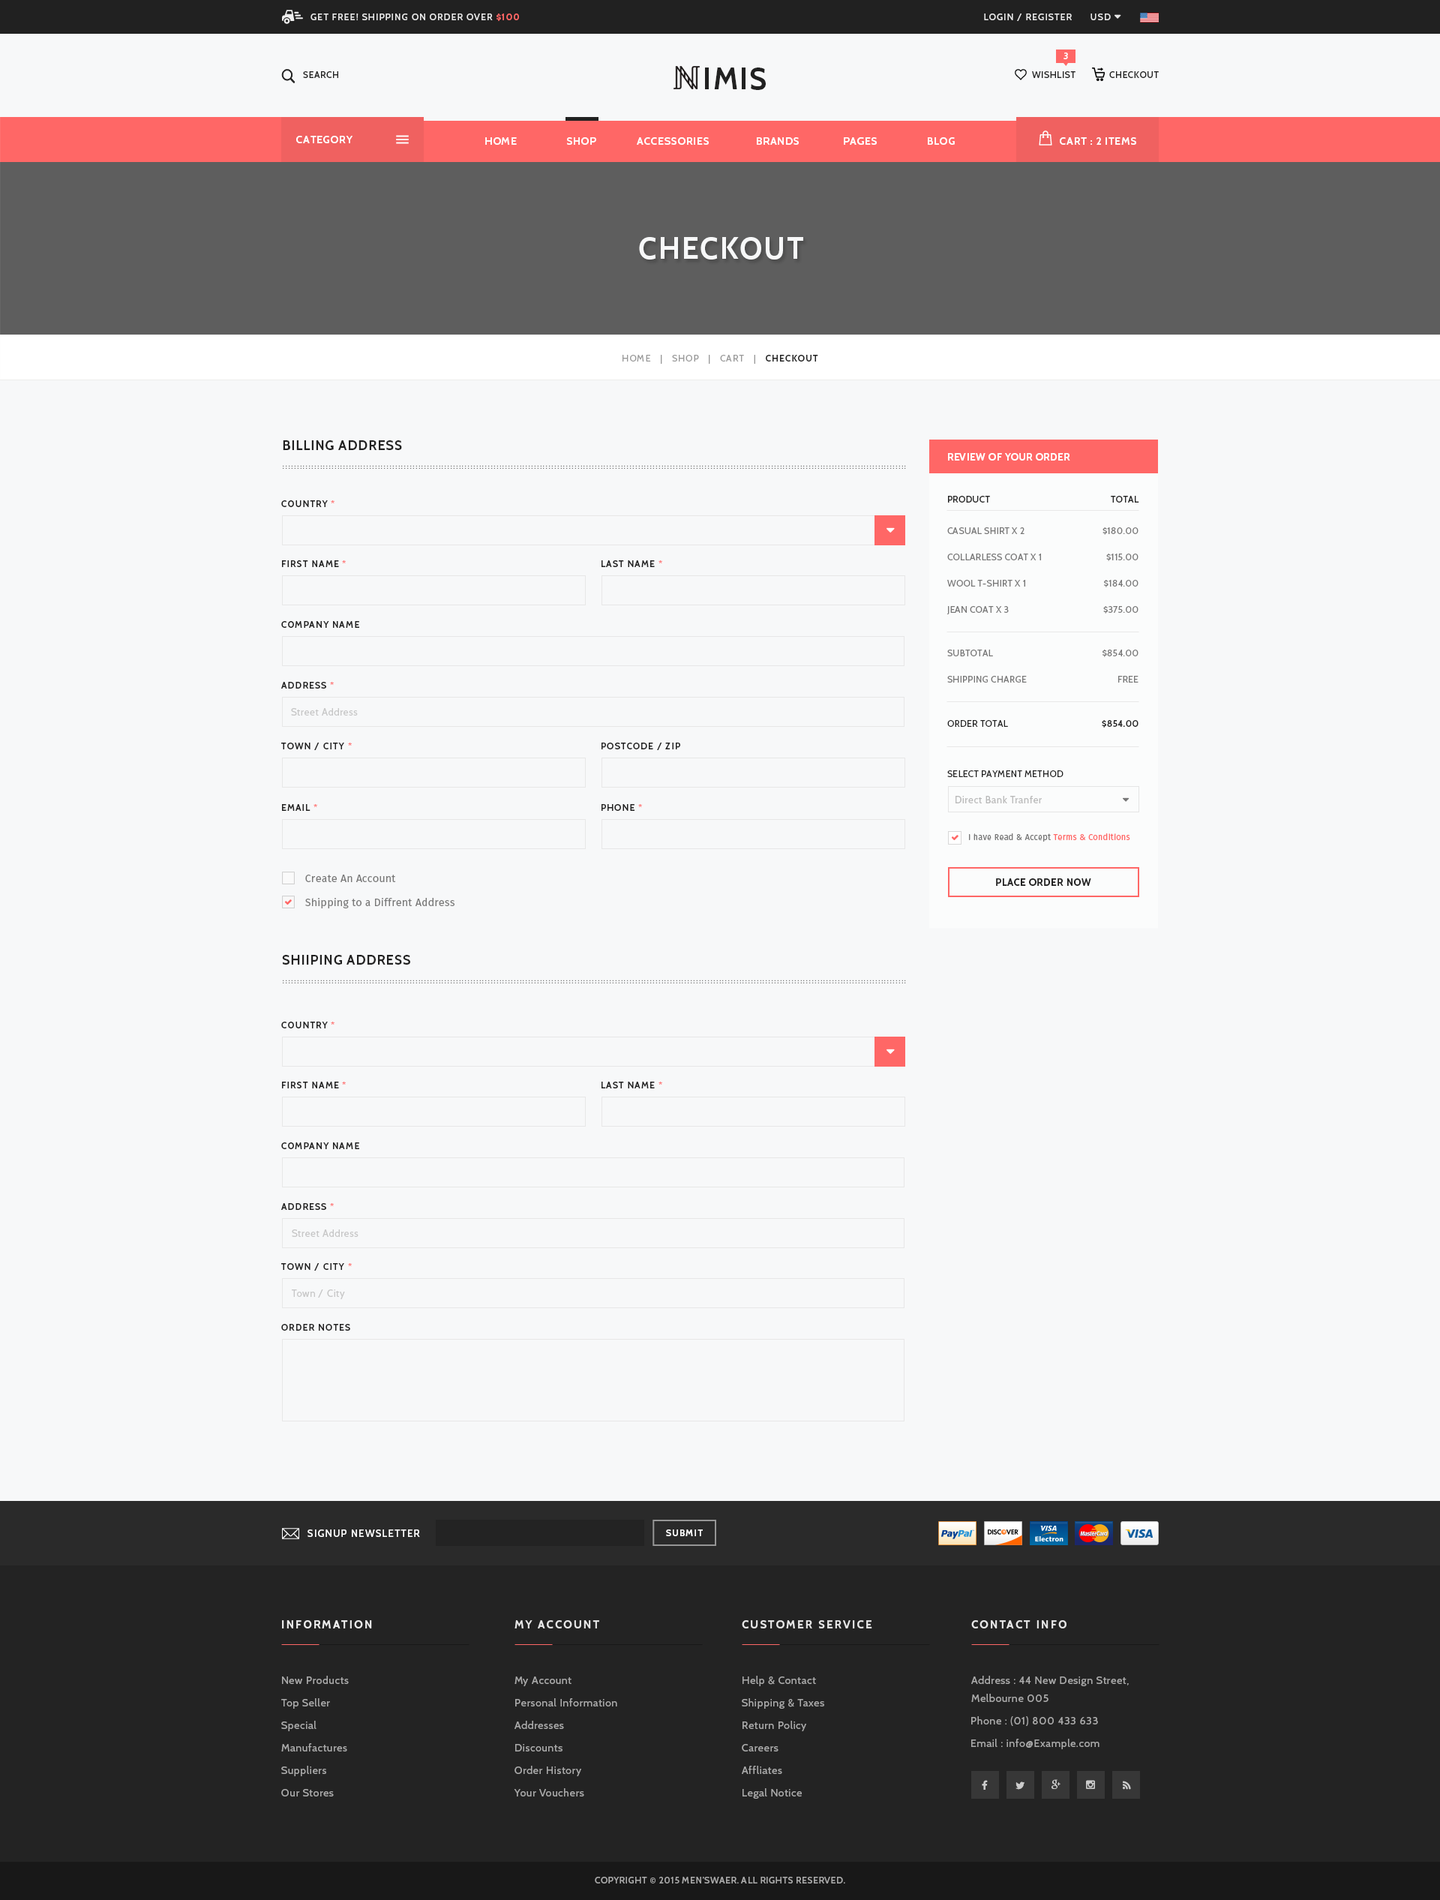
<style>
.page{position:relative;width:1440px;height:1900px;background:#f7f8f9}
.page>*{position:absolute;margin:0}
.t1{font:9px "Cabin-Medium";letter-spacing:0.1em;color:#e8e8e8;text-transform:uppercase}
.t2{font:9px "Cabin-Bold";letter-spacing:0.1em;color:#ff6766;text-transform:uppercase}
.t3{font:9px "Cabin-SemiBold";letter-spacing:0.05em;color:#ffffff;text-transform:uppercase}
.t4{font:9px "Cabin-Medium";letter-spacing:0.05em;color:#212121;text-transform:uppercase}
.t5{font:30px "Cabin-Bold";letter-spacing:0.05em;color:#212121;text-transform:uppercase}
.t6{font:10.5px "Cabin-Bold";letter-spacing:0.05em;color:#ffffff;text-transform:uppercase}
.t7{font:30px "Cabin-Bold";letter-spacing:0.05em;color:#f7f8f9;text-transform:uppercase}
.t8{font:9px "Cabin-Regular";letter-spacing:0.1em;color:#999999;text-transform:uppercase}
.t9{font:9px "Cabin-SemiBold";letter-spacing:0.1em;color:#212121;text-transform:uppercase}
.t10{font:13.5px "Cabin-Bold";letter-spacing:0.05em;color:#212121;text-transform:uppercase}
.t11{font:9.8px "Cabin-Bold";letter-spacing:0.05em;color:#ffffff;text-transform:uppercase}
.t12{font:6px "Cabin-Bold";letter-spacing:0.25em;color:#737373;text-transform:uppercase}
.t13{font:9px "Cabin-Medium";letter-spacing:0.03em;color:#232323;text-transform:uppercase}
.t14{font:9px "Cabin-SemiBold";letter-spacing:0.1em;color:#ff6766;text-transform:uppercase}
.t15{font:9px "Cabin-Regular";letter-spacing:0.03em;color:#777777;text-transform:uppercase}
.t16{font:9.8px "Cabin-Regular";letter-spacing:0.05em;color:#c7c7c7}
.t17{font:9px "Cabin-Regular";letter-spacing:0.03em;color:#212121;text-transform:uppercase}
.t18{font:9px "Cabin-SemiBold";letter-spacing:0.03em;color:#212121;text-transform:uppercase}
.t19{font:9.8px "Cabin-Regular";letter-spacing:0.05em;color:#bababa}
.t20{font:8.2px "FiraSans-Regular";letter-spacing:0.02em;color:#777777}
.t21{font:8.2px "FiraSans-Regular";letter-spacing:0.02em;color:#ff6766}
.t22{font:10.5px "FiraSans-Regular";letter-spacing:0.02em;color:#777777}
.t23{font:9.8px "Cabin-Bold";letter-spacing:0.05em;color:#232323;text-transform:uppercase}
.t24{font:9.7px "Cabin-Medium";letter-spacing:0.1em;color:#ffffff;text-transform:uppercase}
.t25{font:9px "Cabin-SemiBold";letter-spacing:0.1em;color:#ffffff;text-transform:uppercase}
.t26{font:11.2px "Cabin-Bold";letter-spacing:0.15em;color:#eeeeee;text-transform:uppercase}
.t27{font:11.2px "Cabin-Bold";letter-spacing:0.15em;color:#e8e8e8;text-transform:uppercase}
.t28{font:10.5px "Cabin-Regular";letter-spacing:0.05em;color:#aaaaaa}
.t29{font:10.5px/18px "Cabin-Regular";letter-spacing:0.05em;color:#aaaaaa}
.t30{font:9px "Cabin-Medium";letter-spacing:0.05em;color:#aaaaaa;text-transform:uppercase}
</style>
<div class="page">
<p class="t1" style="left:310px;top:14px;width:209px;height:7px">get free! shipping on order over <span class="t2">$100</span></p>
<p class="t1" style="left:984px;top:14px;width:88px;height:7px">login / register</p>
<p class="t3" style="left:1064px;top:52px;width:4px;height:7px">3</p>
<p class="t4" style="left:303px;top:71px;width:35px;height:7px">search</p>
<p class="t5" style="left:705px;top:68px;width:61px;height:22px">imis</p>
<p class="t4" style="left:1032px;top:71px;width:44px;height:7px">wishlist</p>
<p class="t4" style="left:1109px;top:71px;width:50px;height:7px">checkout</p>
<p class="t6" style="left:296px;top:136px;width:56px;height:7px">category</p>
<p class="t6" style="left:485px;top:137px;width:470px;height:8px">home                 shop              accessories                brands               pages                 Blog</p>
<p class="t6" style="left:1060px;top:137px;width:76px;height:8px">cart : 2 items</p>
<p class="t7" style="left:639px;top:237px;width:164px;height:23px">checkout</p>
<p class="t8" style="left:622px;top:355px;width:196px;height:9px">home   |   Shop   |   Cart   |   <span class="t9">checkout</span></p>
<p class="t10" style="left:283px;top:440px;width:119px;height:10px">Billing Address</p>
<p class="t11" style="left:948px;top:453px;width:122px;height:7px">Review of Your Order</p>
<p class="t12" style="left:283px;top:467px;width:623px;height:2px">........................................................................................................................................................................................................................</p>
<p class="t12" style="left:283px;top:465px;width:623px;height:1px">........................................................................................................................................................................................................................</p>
<p class="t13" style="left:948px;top:496px;width:42px;height:6px">Product</p>
<p class="t13" style="left:1111px;top:496px;width:28px;height:6px">Total</p>
<p class="t9" style="left:281px;top:500px;width:53px;height:7px">Country<span class="t14"> *</span></p>
<p class="t15" style="left:947px;top:527px;width:77px;height:7px">casual shirt x 2</p>
<p class="t15" style="left:1102px;top:527px;width:36px;height:8px">$180.00</p>
<p class="t15" style="left:947px;top:554px;width:94px;height:6px">collarless coat x 1</p>
<p class="t15" style="left:1106px;top:554px;width:32px;height:7px">$115.00</p>
<p class="t9" style="left:282px;top:560px;width:64px;height:7px">First Name<span class="t14"> *</span></p>
<p class="t9" style="left:602px;top:560px;width:60px;height:7px">Last Name<span class="t14"> *</span></p>
<p class="t15" style="left:947px;top:580px;width:78px;height:6px">wool t-shirt x 1</p>
<p class="t15" style="left:1104px;top:580px;width:34px;height:7px">$184.00</p>
<p class="t15" style="left:946px;top:606px;width:63px;height:8px">jean coat x 3</p>
<p class="t15" style="left:1103px;top:606px;width:35px;height:8px">$375.00</p>
<p class="t9" style="left:281px;top:621px;width:78px;height:7px">Company Name</p>
<p class="t15" style="left:947px;top:650px;width:46px;height:6px">SubTotal</p>
<p class="t15" style="left:1102px;top:650px;width:36px;height:7px">$854.00</p>
<p class="t15" style="left:947px;top:676px;width:80px;height:6px">Shipping Charge</p>
<p class="t15" style="left:1118px;top:676px;width:20px;height:6px">Free</p>
<p class="t9" style="left:281px;top:682px;width:53px;height:6px">Address<span class="t14"> *</span></p>
<p class="t16" style="left:291px;top:708px;width:67px;height:8px">Street Address</p>
<p class="t17" style="left:947px;top:720px;width:61px;height:7px">Order total</p>
<p class="t18" style="left:1102px;top:720px;width:36px;height:8px">$854.00</p>
<p class="t9" style="left:281px;top:742px;width:71px;height:8px">Town / city<span class="t14"> *</span></p>
<p class="t9" style="left:602px;top:742px;width:78px;height:8px">Postcode / zip</p>
<p class="t17" style="left:947px;top:770px;width:117px;height:7px">select payment method</p>
<p class="t19" style="left:956px;top:796px;width:86px;height:7px">Direct Bank Tranfer</p>
<p class="t9" style="left:282px;top:804px;width:35px;height:7px">Email<span class="t14"> *</span></p>
<p class="t9" style="left:602px;top:804px;width:40px;height:7px">Phone<span class="t14"> *</span></p>
<p class="t20" style="left:969px;top:833px;width:161px;height:9px">I have Read &amp; Accept<span class="t21"> Terms &amp; Conditions</span></p>
<p class="t22" style="left:305px;top:874px;width:91px;height:8px">Create An Account</p>
<p class="t23" style="left:996px;top:878px;width:95px;height:8px">Place order now</p>
<p class="t22" style="left:305px;top:898px;width:149px;height:10px">Shipping to a Diffrent Address</p>
<p class="t10" style="left:282px;top:955px;width:128px;height:9px">Shiiping Address</p>
<p class="t12" style="left:283px;top:982px;width:623px;height:1px">........................................................................................................................................................................................................................</p>
<p class="t12" style="left:283px;top:980px;width:623px;height:1px">........................................................................................................................................................................................................................</p>
<p class="t9" style="left:281px;top:1022px;width:53px;height:6px">Country<span class="t14"> *</span></p>
<p class="t9" style="left:282px;top:1082px;width:64px;height:6px">First Name<span class="t14"> *</span></p>
<p class="t9" style="left:602px;top:1082px;width:60px;height:6px">Last Name<span class="t14"> *</span></p>
<p class="t9" style="left:281px;top:1142px;width:78px;height:7px">Company Name</p>
<p class="t9" style="left:281px;top:1203px;width:53px;height:7px">Address<span class="t14"> *</span></p>
<p class="t16" style="left:292px;top:1229px;width:66px;height:8px">Street Address</p>
<p class="t9" style="left:281px;top:1263px;width:71px;height:7px">town / city<span class="t14"> *</span></p>
<p class="t16" style="left:292px;top:1289px;width:53px;height:10px">Town / City</p>
<p class="t9" style="left:281px;top:1324px;width:69px;height:6px">Order Notes</p>
<p class="t24" style="left:308px;top:1529px;width:112px;height:8px">signup newsletter</p>
<p class="t25" style="left:666px;top:1529px;width:37px;height:7px">Submit</p>
<p class="t26" style="left:282px;top:1620px;width:90px;height:8px">information</p>
<p class="t27" style="left:514px;top:1620px;width:85px;height:8px">my account</p>
<p class="t27" style="left:742px;top:1620px;width:130px;height:8px">customer service</p>
<p class="t27" style="left:971px;top:1620px;width:95px;height:8px">contact Info</p>
<p class="t28" style="left:282px;top:1676px;width:67px;height:8px">New Products</p>
<p class="t28" style="left:514px;top:1676px;width:58px;height:10px">My Account</p>
<p class="t28" style="left:742px;top:1676px;width:74px;height:10px">Help &amp; Contact</p>
<p class="t29" style="left:971px;top:1676px;width:158px;height:26px">Address : 44 New Design Street,<br>Melbourne 005</p>
<p class="t28" style="left:281px;top:1698px;width:49px;height:10px">Top Seller</p>
<p class="t28" style="left:515px;top:1698px;width:102px;height:8px">Personal Information</p>
<p class="t28" style="left:742px;top:1698px;width:82px;height:10px">Shipping &amp; Taxes</p>
<p class="t28" style="left:281px;top:1720px;width:35px;height:11px">Special</p>
<p class="t28" style="left:514px;top:1720px;width:50px;height:9px">Addresses</p>
<p class="t28" style="left:742px;top:1720px;width:64px;height:11px">Return Policy</p>
<p class="t28" style="left:971px;top:1716px;width:127px;height:10px">Phone : (01) 800 433 633</p>
<p class="t28" style="left:281px;top:1743px;width:66px;height:8px">Manufactures</p>
<p class="t28" style="left:515px;top:1744px;width:47px;height:7px">Discounts</p>
<p class="t28" style="left:742px;top:1744px;width:36px;height:7px">Careers</p>
<p class="t28" style="left:971px;top:1738px;width:129px;height:11px">Email : info@Example.com</p>
<p class="t28" style="left:281px;top:1766px;width:45px;height:10px">Suppliers</p>
<p class="t28" style="left:514px;top:1766px;width:67px;height:10px">Order History</p>
<p class="t28" style="left:742px;top:1766px;width:40px;height:8px">Affliates</p>
<p class="t28" style="left:281px;top:1789px;width:53px;height:7px">Our Stores</p>
<p class="t28" style="left:514px;top:1788px;width:70px;height:8px">Your Vouchers</p>
<p class="t28" style="left:742px;top:1788px;width:60px;height:10px">Legal Notice</p>
<p class="t30" style="left:595px;top:1876px;width:250px;height:7px">Copyright © 2015 Men’swaer. All Rights Reserved.</p>
</div>
